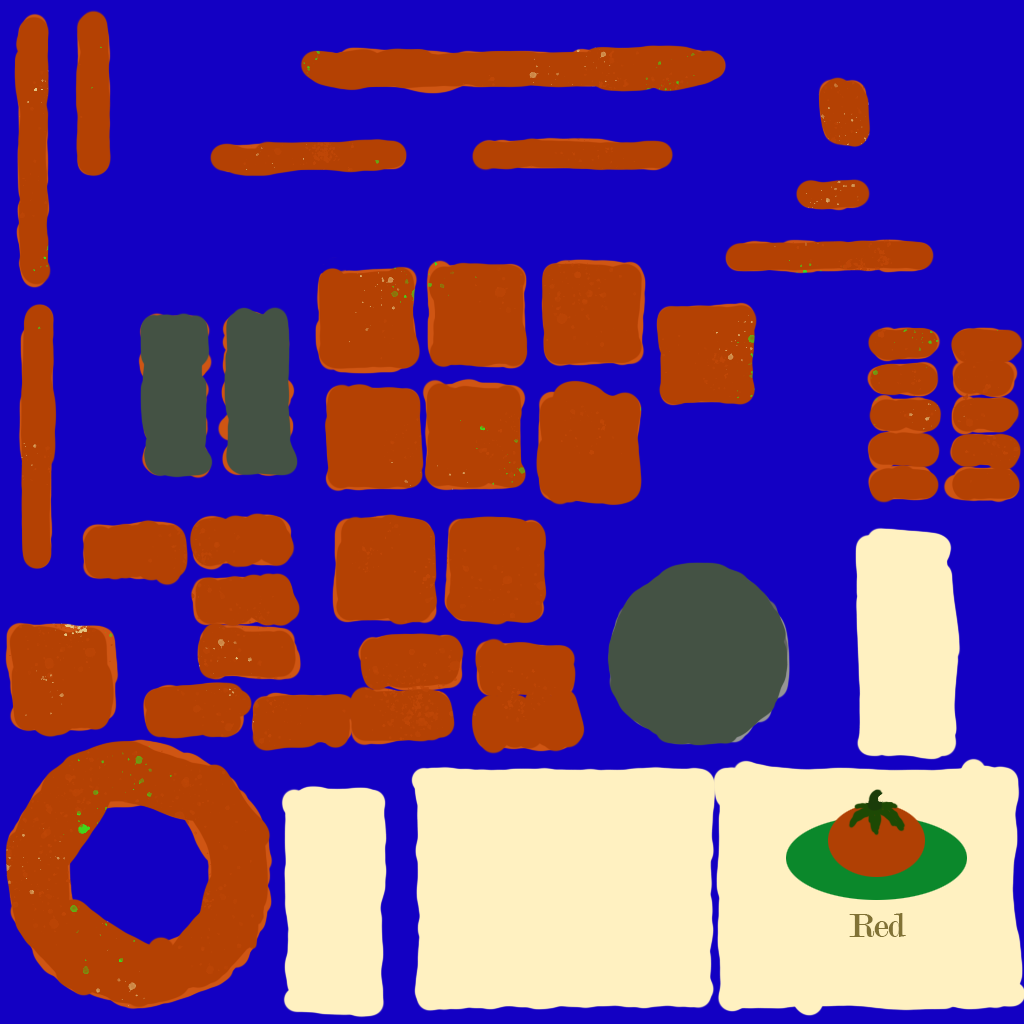
<style>
.page{position:relative;width:1024px;height:1024px;background:#1300c3}
.page>*{position:absolute;margin:0}
.t1{font:36px "Modern-Regular";color:#817235}
</style>
<div class="page">
<p class="t1" style="left:849px;top:913px;width:57px;height:24px">Red</p>
</div>
